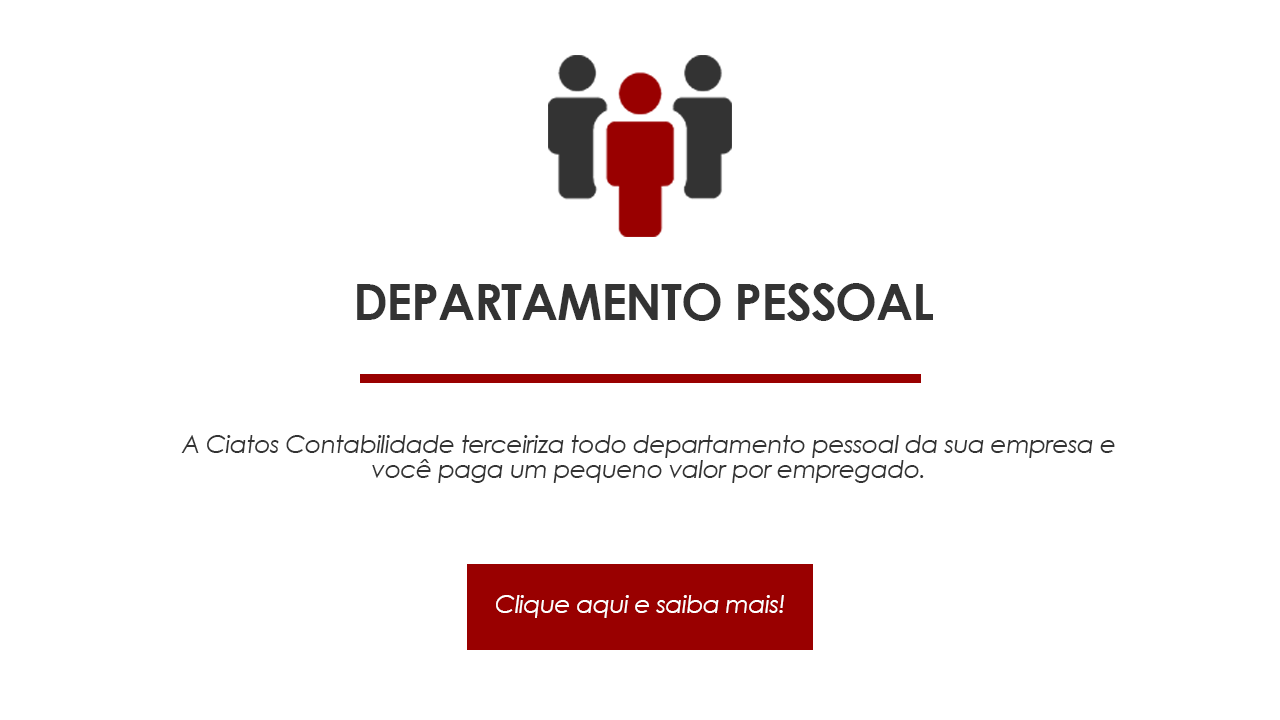
<style>
.page{position:relative;width:1280px;height:720px;background:#ffffff}
.page>*{position:absolute;margin:0}
.t1{font:50px "CenturyGothic-Bold";letter-spacing:-0.025em;color:#333333}
.t2{font:25px/25px "CenturyGothic-Italic";letter-spacing:-0.025em;color:#333333}
.t3{font:25px "CenturyGothic-Italic";letter-spacing:-0.025em;color:#ffffff}
</style>
<div class="page">
<p class="t1" style="left:357px;top:283px;width:576px;height:38px">DEPARTAMENTO PESSOAL</p>
<p class="t2" style="left:181px;top:435px;width:934px;height:48px;text-align:center">A Ciatos Contabilidade terceiriza todo departamento pessoal da sua empresa e você paga um pequeno valor por empregado.</p>
<p class="t3" style="left:496px;top:595px;width:288px;height:23px">Clique aqui e saiba mais!</p>
</div>
